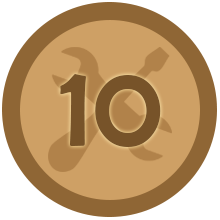
<style>
.page{position:relative;width:220px;height:220px;background:#cea065}
.page>*{position:absolute;margin:0}
.t1{font:120px "BerlinSansFB-Reg";color:#775329}
</style>
<div class="page">
<p class="t1" style="left:60px;top:74px;width:101px;height:73px">10</p>
</div>
